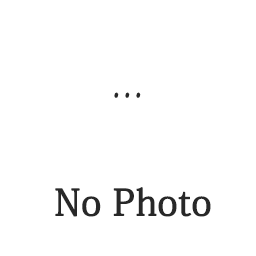
<style>
.page{position:relative;width:256px;height:256px;background:#ffffff}
.page>*{position:absolute;margin:0}
.t1{font:36px "MLingWaiMedium-SC";color:#282828;font-weight:bold}
.t2{font:36px "AdobeKaitiStd-Regular";color:#282828;font-weight:bold}
</style>
<div class="page">
<p class="t1" style="left:114px;top:92px;width:27px;height:6px">...</p>
<p class="t2" style="left:55px;top:187px;width:156px;height:30px">No Photo</p>
</div>
